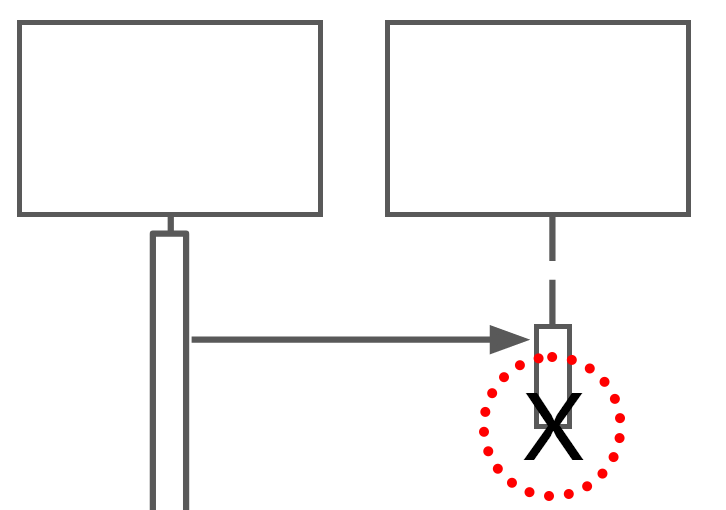
<style>
.page{position:relative;width:726px;height:510px;background:#ffffff}
.page>*{position:absolute;margin:0}
.t1{font:96px "PTSans-Caption";color:#000000}
</style>
<div class="page">
<p class="t1" style="left:523px;top:393px;width:61px;height:67px">X</p>
</div>
